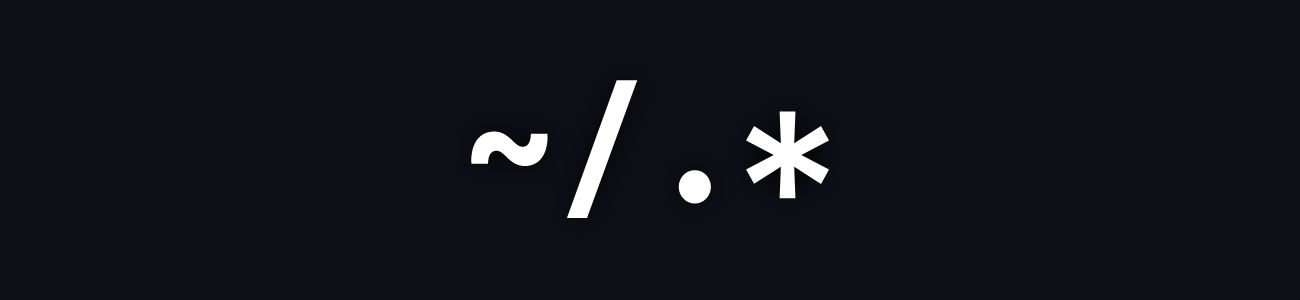
<style>
.page{position:relative;width:1300px;height:300px;background:#0d1117}
.page>*{position:absolute;margin:0}
.t1{font:150px "SFMonoNerdFontComplete-Bold";color:#ffffff}
</style>
<div class="page">
<p class="t1" style="left:471px;top:80px;width:358px;height:139px">~/.*</p>
</div>
